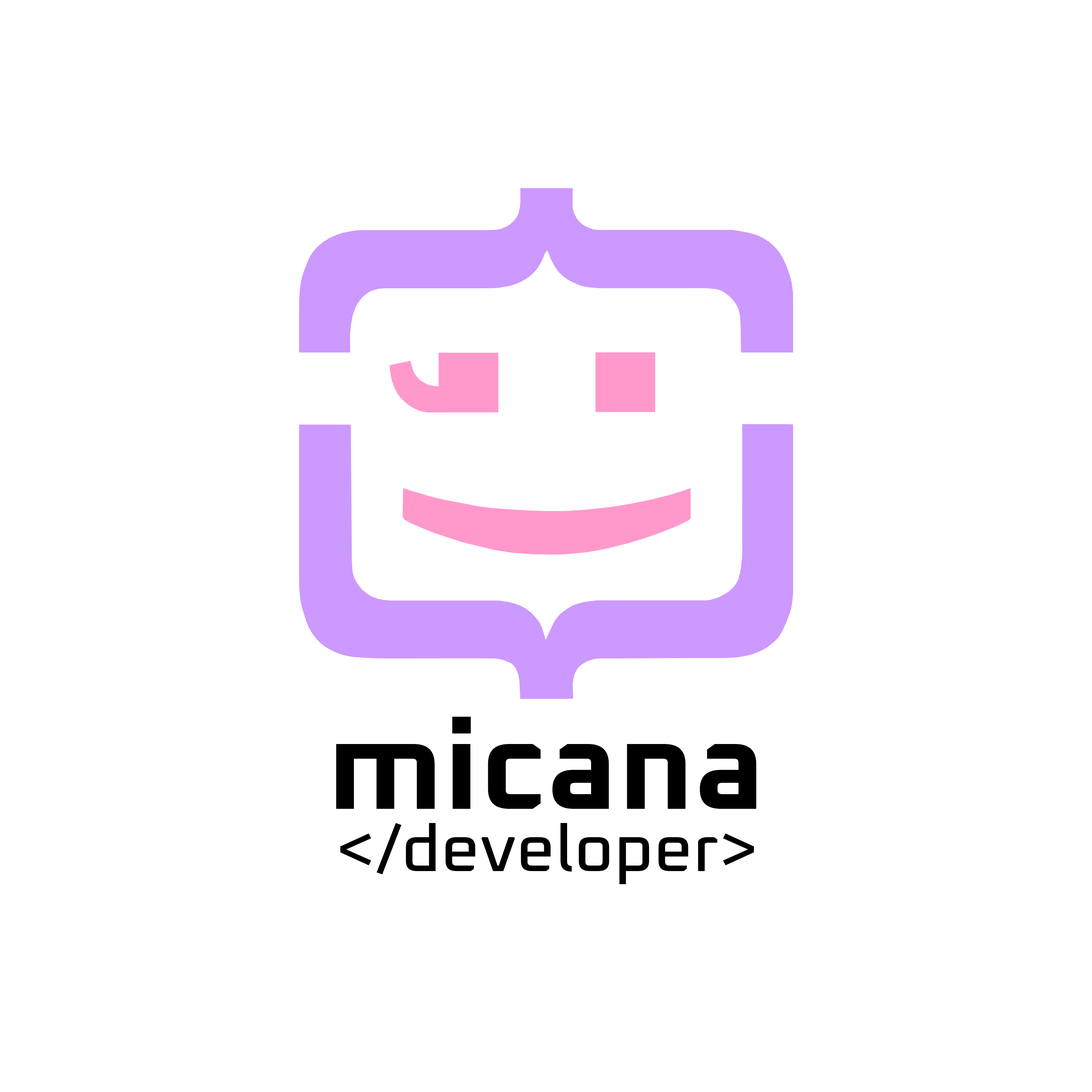
<style>
.page{position:relative;width:1092px;height:1092px;background:#ffffff}
.page>*{position:absolute;margin:0}
.t1{font:122.6px "OxaniumRoman-Bold";color:#000000;scale:1.05 1}
.t2{font:64.7px "OxaniumRoman-Medium";color:#000000;scale:1.05 1}
</style>
<div class="page">
<p class="t1" style="left:336px;top:717px;width:420px;height:92px">micana</p>
<p class="t2" style="left:340px;top:823px;width:414px;height:61px">&lt;/developer&gt;</p>
</div>
